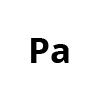
<style>
.page{position:relative;width:100px;height:100px;background:#ffffff}
.page>*{position:absolute;margin:0}
.t1{font:35px "OpenSans-Bold";color:#000000}
</style>
<div class="page">
<p class="t1" style="left:31px;top:38px;width:38px;height:25px">Pa</p>
</div>
